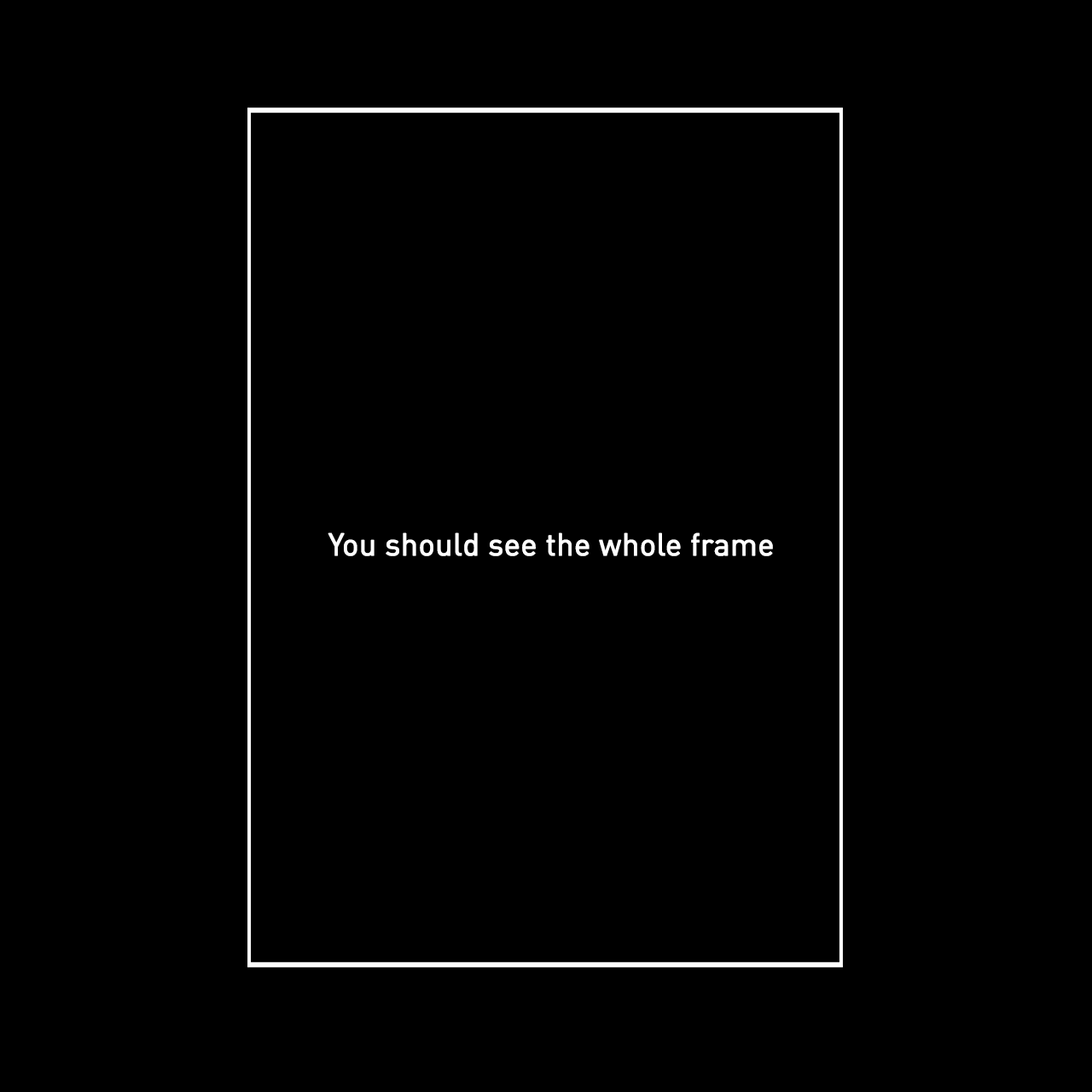
<style>
.page{position:relative;width:1092px;height:1092px;background:#000000}
.page>*{position:absolute;margin:0}
.t1{font:30.7px "DIN-Regular";letter-spacing:-0.01em;color:#ffffff;font-weight:bold}
</style>
<div class="page">
<p class="t1" style="left:328px;top:532px;width:445px;height:24px">You should see the whole frame</p>
</div>
